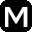
<style>
.page{position:relative;width:32px;height:32px;background:#000000}
.page>*{position:absolute;margin:0}
.t1{font:30px "AllianzNeo-SemiBold";color:#ffffff}
</style>
<div class="page">
<p class="t1" style="left:5px;top:7px;width:23px;height:20px">M</p>
</div>
